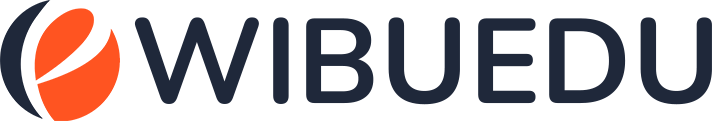
<style>
.page{position:relative;width:725px;height:121px;background:#ffffff}
.page>*{position:absolute;margin:0}
.t1{font:120px "Nunito-Bold";color:#1f283a}
</style>
<div class="page">
<p class="t1" style="left:134px;top:17px;width:578px;height:88px">WIBUEDU</p>
</div>
